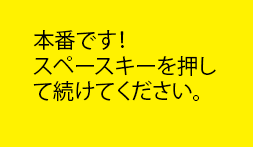
<style>
.page{position:relative;width:253px;height:147px;background:#fff200}
.page>*{position:absolute;margin:0}
.t1{font:21.3px "KozGoPr6N-Regular";color:#000000}
</style>
<div class="page">
<p class="t1" style="left:33px;top:30px;width:183px;height:72px">本番です！<br>スペースキーを押し<br>て続けてください。</p>
</div>
